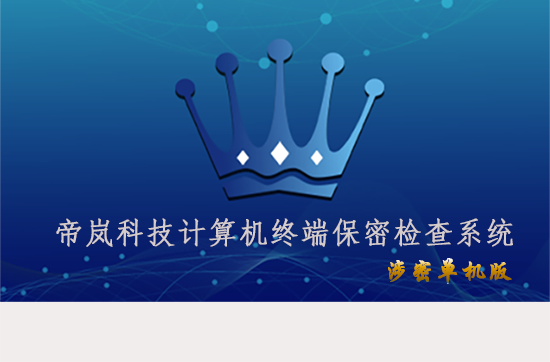
<style>
.page{position:relative;width:550px;height:362px}
.page>*{position:absolute;margin:0}
.t1{font:30.1px "FangSong";color:#d5cccc;font-weight:bold}
.t2{font:25px "STXingkai";font-weight:bold}
</style>
<div class="page">
<p class="t1" style="left:56px;top:218px;width:457px;height:29px">帝岚科技计算机终端保密检查系统</p>
<p class="t2" style="left:388px;top:258px;width:124px;height:26px">涉密单机版</p>
</div>
